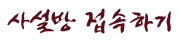
<style>
.page{position:relative;width:180px;height:40px;background:#ffffff}
.page>*{position:absolute;margin:0}
.t1{font:26.9px "JShinYeongBok-Regular";color:#5b0f1c}
</style>
<div class="page">
<p class="t1" style="left:7px;top:8px;width:164px;height:26px">사설방 접속하기</p>
</div>
